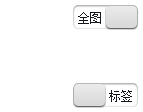
<style>
.page{position:relative;width:143px;height:112px;background:#ffffff}
.page>*{position:absolute;margin:0}
.t1{font:12px "SimSun";color:#15191d}
.t2{font:12px "SimSun";color:#14171b}
</style>
<div class="page">
<p class="t1" style="left:78px;top:12px;width:23px;height:12px">全图</p>
<p class="t2" style="left:109px;top:90px;width:23px;height:12px">标签</p>
</div>
